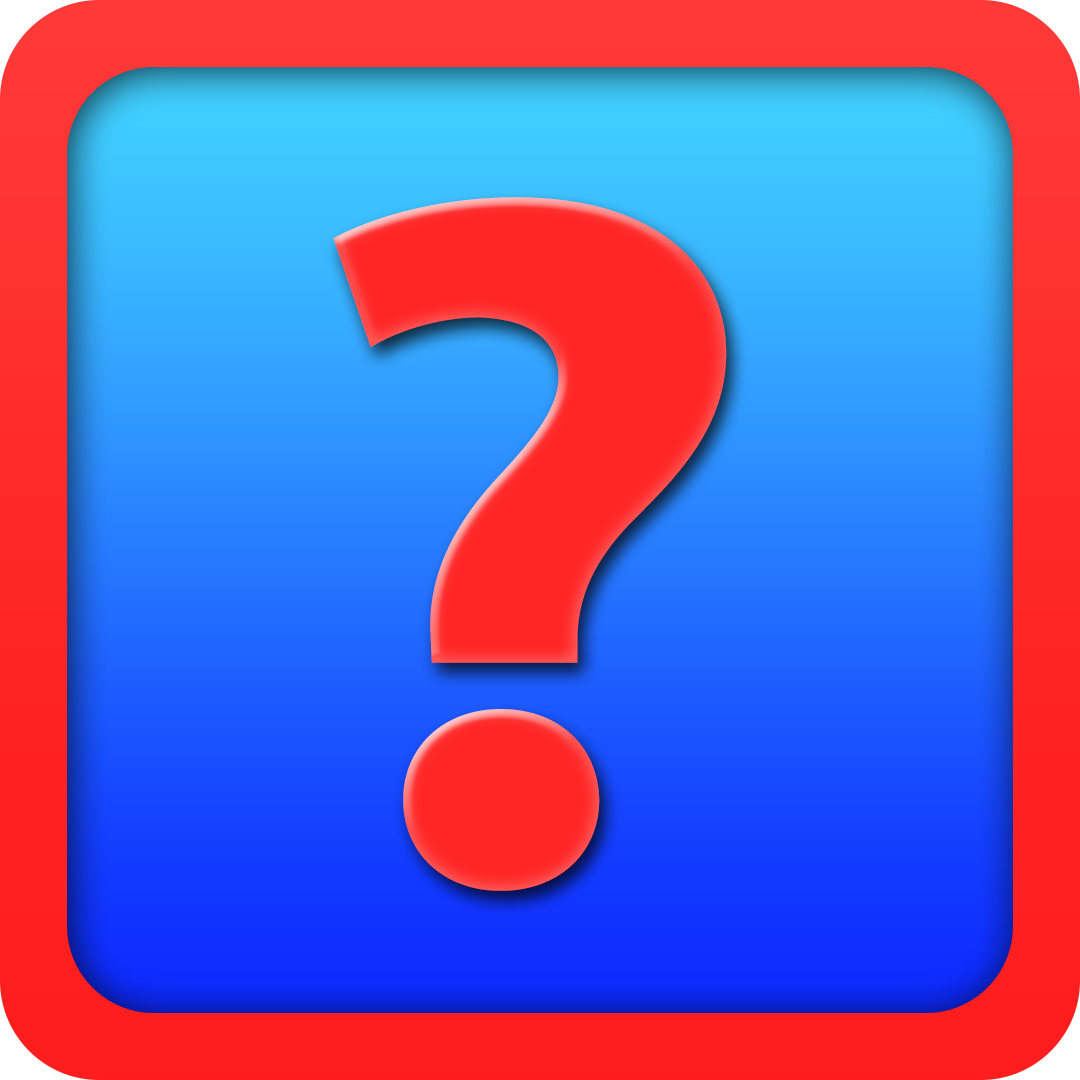
<style>
.page{position:relative;width:1080px;height:1080px}
.page>*{position:absolute;margin:0}
.t1{font:995.7px "MyriadPro-Bold";color:#ff2525;font-weight:bold;scale:1.1 1}
</style>
<div class="page">
<p class="t1" style="left:333px;top:197px;width:394px;height:694px">?</p>
</div>
